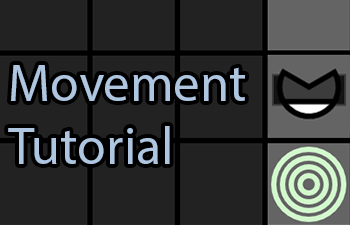
<style>
.page{position:relative;width:350px;height:225px;background:#222222}
.page>*{position:absolute;margin:0}
.t1{font:52.5px "MyriadPro-Regular";color:#afc6e0}
</style>
<div class="page">
<p class="t1" style="left:8px;top:65px;width:237px;height:99px">Movement<br>Tutorial</p>
</div>
